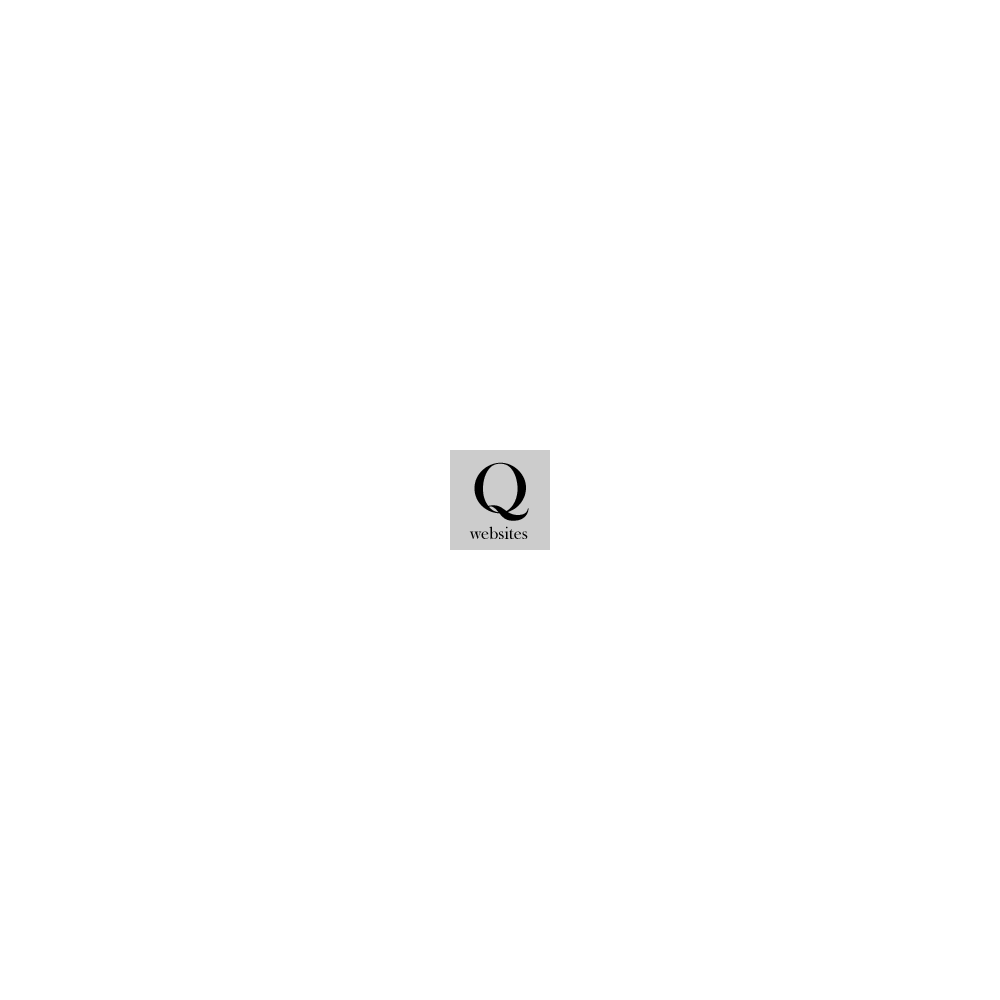
<style>
.page{position:relative;width:1000px;height:1000px;background:#ffffff}
.page>*{position:absolute;margin:0}
.t1{font:72px "BaskOldFace";color:#000000}
.t2{font:18px "BaskOldFace";color:#000000}
</style>
<div class="page">
<p class="t1" style="left:474px;top:462px;width:55px;height:59px">Q</p>
<p class="t2" style="left:469px;top:526px;width:59px;height:14px">websites</p>
</div>
